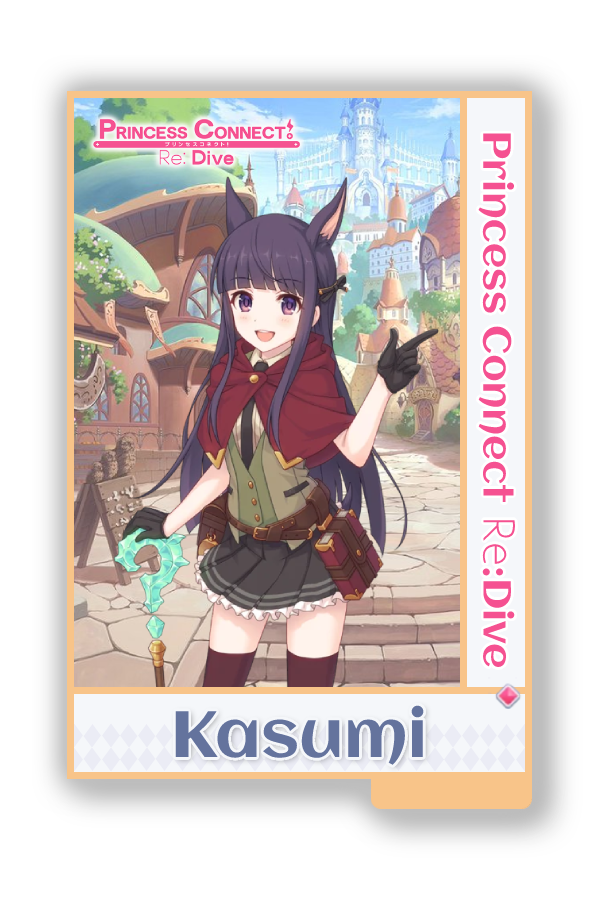
<style>
.page{position:relative;width:600px;height:900px;background:#ffffff}
.page>*{position:absolute;margin:0}
.t1{font:39px "Aclonica-Regular";color:#f55191}
.t2{font:39px "AaarghNormal";color:#f55191}
.t3{font:65px "Aclonica-Regular";color:#64739d}
</style>
<div class="page">
<p class="t1" style="left:478px;top:133px;width:38px;height:534px;rotate:90deg">Princess Connect <span class="t2">Re</span>:Dive</p>
<p class="t3" style="left:175px;top:705px;width:249px;height:60px">Kasumi</p>
</div>
